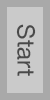
<style>
.page{position:relative;width:50px;height:100px;background:#cacaca}
.page>*{position:absolute;margin:0}
.t1{font:23.9px "HelveticaNeue";letter-spacing:0.012em;color:#494949}
</style>
<div class="page">
<p class="t1" style="left:16px;top:24px;width:20px;height:52px;rotate:90deg">Start</p>
</div>
